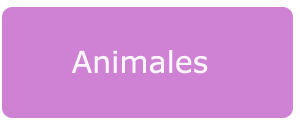
<style>
.page{position:relative;width:300px;height:125px;background:#cf81d4}
.page>*{position:absolute;margin:0}
.t1{font:30px "Verdana";color:#fbf6fb}
</style>
<div class="page">
<p class="t1" style="left:72px;top:50px;width:136px;height:24px">Animales</p>
</div>
